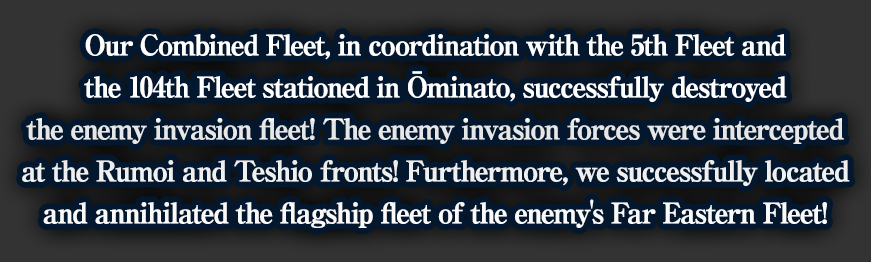
<style>
.page{position:relative;width:871px;height:262px;background:#03172f}
.page>*{position:absolute;margin:0}
.t1{font:28px/42px "RyuminPro-ExBold";letter-spacing:-0.08em;color:#ffffff;font-weight:bold}
</style>
<div class="page">
<p class="t1" style="left:22px;top:34px;width:828px;height:194px;text-align:center">Our Combined Fleet, in coordination with the 5th Fleet and<br>the 104th Fleet stationed in Ōminato, successfully destroyed<br>the enemy invasion fleet! The enemy invasion forces were intercepted<br>at the Rumoi and Teshio fronts! Furthermore, we successfully located<br>and annihilated the flagship fleet of the enemy's Far Eastern Fleet!</p>
</div>
